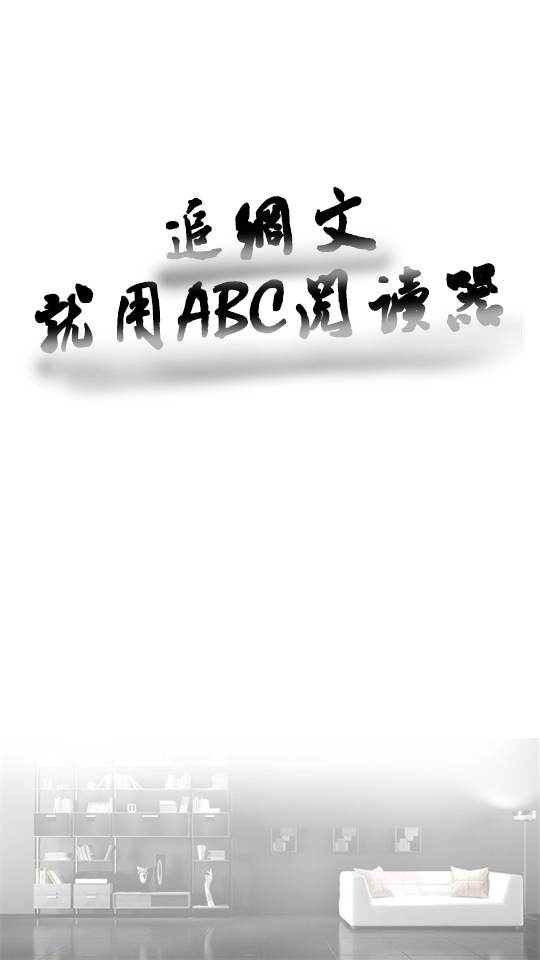
<style>
.page{position:relative;width:540px;height:960px;background:#ffffff}
.page>*{position:absolute;margin:0}
.t1{font:74px/82.2px "ÊéÌå·»Ã×ÜÀÌå";font-weight:bold}
</style>
<div class="page">
<p class="t1" style="left:34px;top:187px;width:470px;height:167px;text-align:center;rotate:-3deg">追网文<br>就用ABC阅读器</p>
</div>
